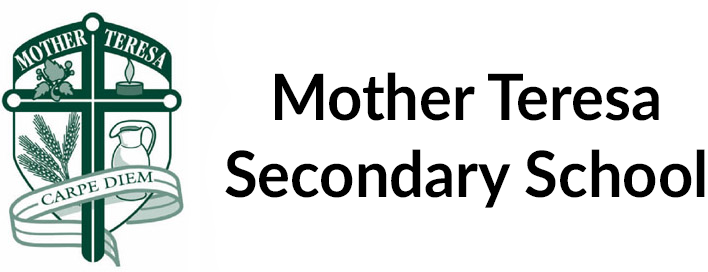
<style>
.page{position:relative;width:708px;height:272px;background:#ffffff}
.page>*{position:absolute;margin:0}
.t1{font:64px "Lato-Bold";color:#000000;scale:0.96 1}
</style>
<div class="page">
<p class="t1" style="left:225px;top:72px;width:480px;height:136px;text-align:center">Mother Teresa<br>Secondary School</p>
</div>
